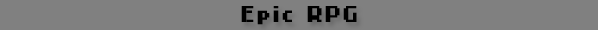
<style>
.page{position:relative;width:598px;height:30px;background:#808080}
.page>*{position:absolute;margin:0}
.t1{font:24px "4Mini";color:#000000}
</style>
<div class="page">
<p class="t1" style="left:241px;top:6px;width:116px;height:19px">Epic RPG</p>
</div>
